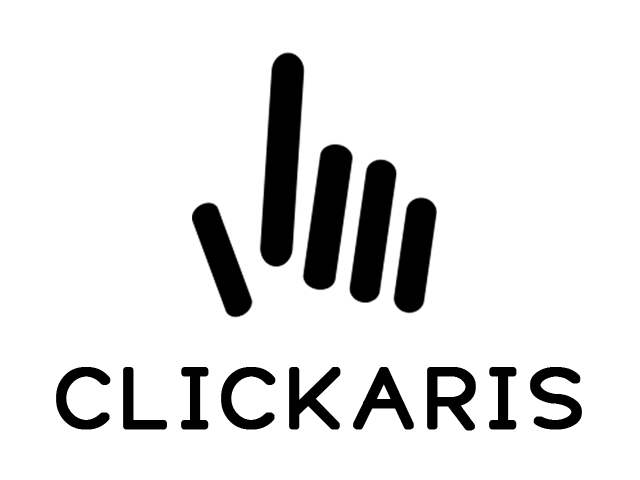
<style>
.page{position:relative;width:640px;height:480px;background:#ffffff}
.page>*{position:absolute;margin:0}
.t1{font:100px "CopyrightViolations";letter-spacing:0.09em;color:#000000;font-weight:bold}
</style>
<div class="page">
<p class="t1" style="left:56px;top:367px;width:526px;height:64px">CLICKARIS</p>
</div>
